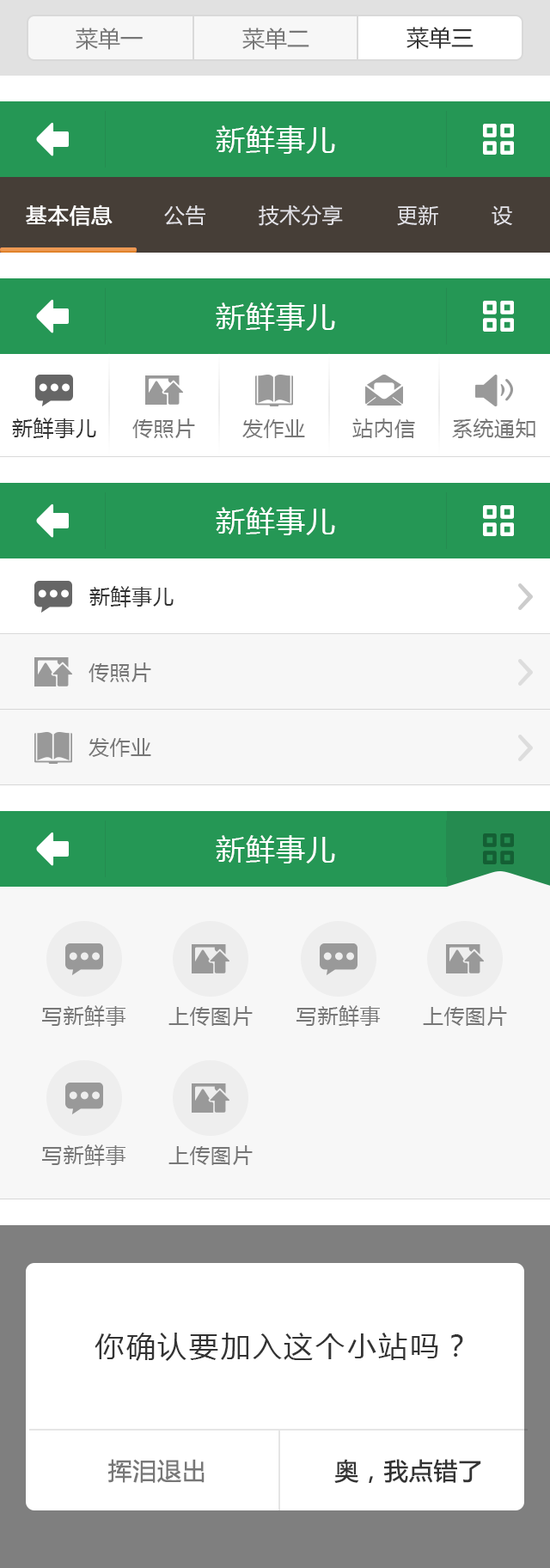
<style>
.page{position:relative;width:550px;height:1568px;background:#ffffff}
.page>*{position:absolute;margin:0}
.t1{font:22.3px "MicrosoftYaHei";color:#777777}
.t2{font:22.3px "MicrosoftYaHei";color:#333333}
.t3{font:20.6px "MicrosoftYaHei";letter-spacing:0.025em;color:#ffffff;font-weight:bold}
.t4{font:20.6px "MicrosoftYaHei";letter-spacing:0.025em;color:#e3e2e7}
.t5{font:20.6px "MicrosoftYaHei";letter-spacing:0.025em;color:#333333}
.t6{font:20.6px "MicrosoftYaHei";letter-spacing:0.025em;color:#777777}
.t7{font:29.2px "MicrosoftYaHei";letter-spacing:0.08em;color:#333333}
.t8{font:24.1px "MicrosoftYaHei";color:#777777;font-weight:bold}
.t9{font:24.1px "MicrosoftYaHei";color:#333333;font-weight:bold}
</style>
<div class="page">
<p class="t1" style="left:76px;top:27px;width:67px;height:23px">菜单一</p>
<p class="t1" style="left:242px;top:27px;width:67px;height:23px">菜单二</p>
<p class="t2" style="left:406px;top:27px;width:67px;height:22px">菜单三</p>
<p class="t3" style="left:26px;top:204px;width:87px;height:22px">基本信息</p>
<p class="t4" style="left:164px;top:205px;width:41px;height:21px">公告</p>
<p class="t4" style="left:259px;top:204px;width:84px;height:22px">技术分享</p>
<p class="t4" style="left:397px;top:204px;width:41px;height:22px">更新</p>
<p class="t4" style="left:491px;top:205px;width:21px;height:21px">设</p>
<p class="t5" style="left:12px;top:418px;width:84px;height:21px">新鲜事儿</p>
<p class="t6" style="left:132px;top:418px;width:63px;height:20px">传照片</p>
<p class="t6" style="left:242px;top:419px;width:63px;height:19px">发作业</p>
<p class="t6" style="left:352px;top:418px;width:63px;height:20px">站内信</p>
<p class="t6" style="left:452px;top:418px;width:83px;height:20px">系统通知</p>
<p class="t5" style="left:89px;top:586px;width:85px;height:21px">新鲜事儿</p>
<p class="t6" style="left:88px;top:662px;width:63px;height:20px">传照片</p>
<p class="t6" style="left:88px;top:738px;width:63px;height:19px">发作业</p>
<p class="t6" style="left:42px;top:1005px;width:84px;height:22px">写新鲜事</p>
<p class="t6" style="left:168px;top:1006px;width:85px;height:20px">上传图片</p>
<p class="t6" style="left:296px;top:1005px;width:85px;height:22px">写新鲜事</p>
<p class="t6" style="left:423px;top:1006px;width:84px;height:20px">上传图片</p>
<p class="t6" style="left:42px;top:1144px;width:84px;height:22px">写新鲜事</p>
<p class="t6" style="left:168px;top:1145px;width:85px;height:20px">上传图片</p>
<p class="t7" style="left:95px;top:1333px;width:368px;height:28px">你确认要加入这个小站吗？</p>
<p class="t8" style="left:108px;top:1459px;width:96px;height:24px">挥泪退出</p>
<p class="t9" style="left:334px;top:1459px;width:147px;height:24px">奥，我点错了</p>
</div>
